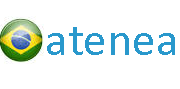
<style>
.page{position:relative;width:180px;height:89px;background:#ffffff}
.page>*{position:absolute;margin:0}
.t1{font:48px "Calibri";color:#2998cc}
</style>
<div class="page">
<p class="t1" style="left:47px;top:27px;width:128px;height:28px">atenea</p>
</div>
